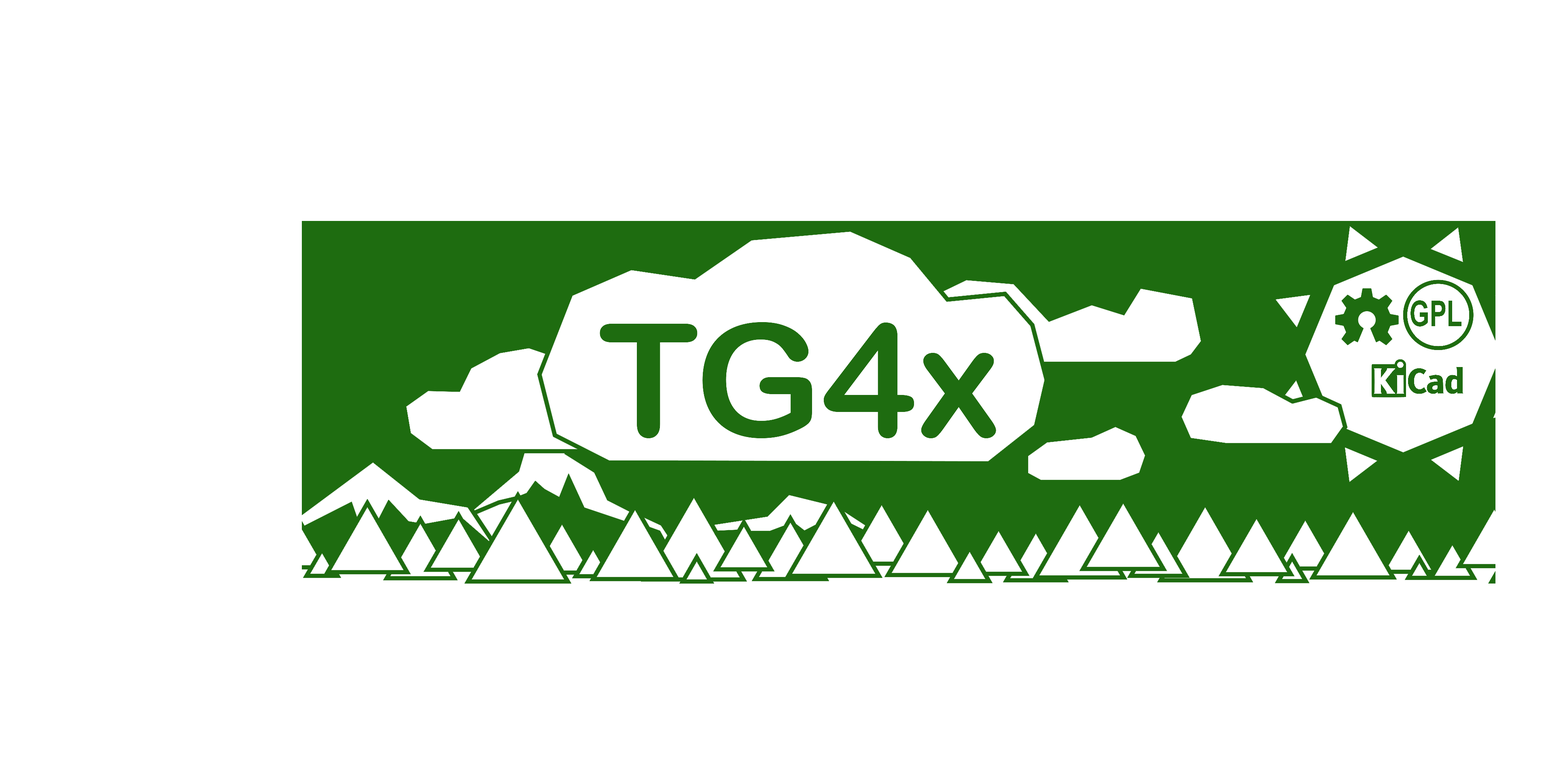
<style>
.page{position:relative;width:1561px;height:764px;background:#ffffff}
.page>*{position:absolute;margin:0}
.t1{font:156.9px "ArialRoundedMTBold";color:#1e6c10}
</style>
<div class="page">
<p class="t1" style="left:600px;top:322px;width:396px;height:116px">TG4x</p>
</div>
